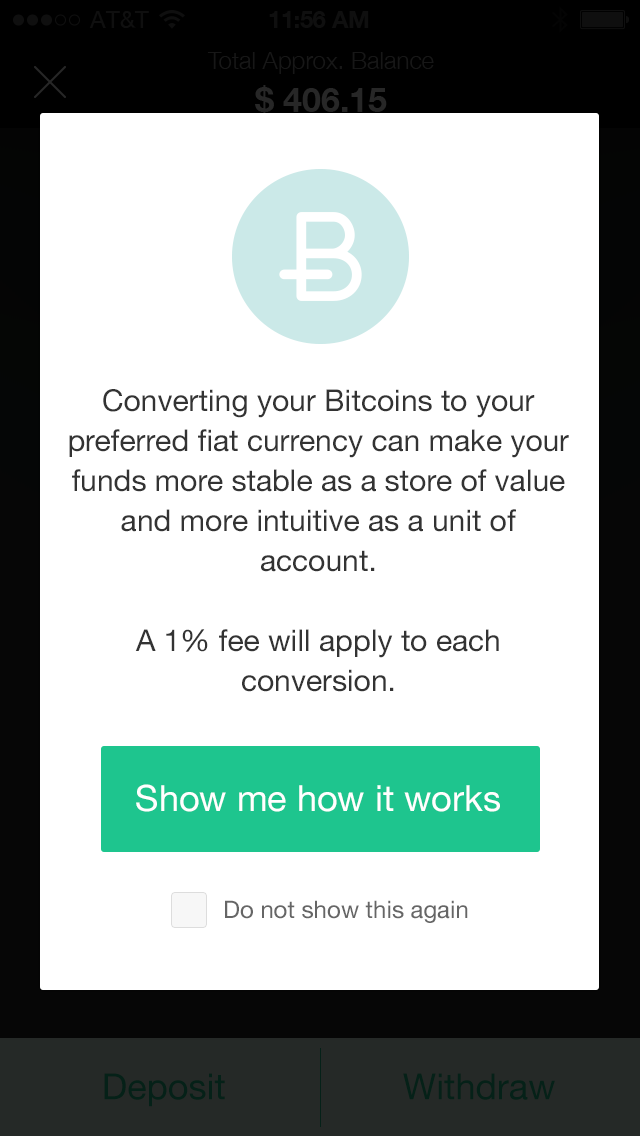
<style>
.page{position:relative;width:640px;height:1136px;background:#ffffff}
.page>*{position:absolute;margin:0}
.t1{font:30px/40px "HelveticaNeue";color:#333333}
.t2{font:36px "HelveticaNeue";color:#ffffff}
.t3{font:24px "HelveticaNeue";color:#666666}
</style>
<div class="page">
<p class="t1" style="left:69px;top:389px;width:500px;height:303px;text-align:center">Converting your Bitcoins to your preferred fiat currency can make your funds more stable as a store of value and more intuitive as a unit of account. <br><br>A 1% fee will apply to each conversion.</p>
<p class="t2" style="left:136px;top:784px;width:364px;height:28px">Show me how it works</p>
<p class="t3" style="left:225px;top:900px;width:243px;height:23px">Do not show this again</p>
</div>
